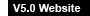
<style>
.page{position:relative;width:90px;height:16px;background:#000000}
.page>*{position:absolute;margin:0}
.t1{font:11px "Arial-BoldMT";color:#ffffff}
</style>
<div class="page">
<p class="t1" style="left:13px;top:4px;width:68px;height:8px">V5.0 Website</p>
</div>
